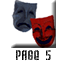
<style>
.page{position:relative;width:65px;height:65px;background:#ffffff}
.page>*{position:absolute;margin:0}
.t1{font:14px "WeltronUrban";color:#000000}
</style>
<div class="page">
<p class="t1" style="left:0px;top:47px;width:65px;height:19px">Page 5</p>
</div>
